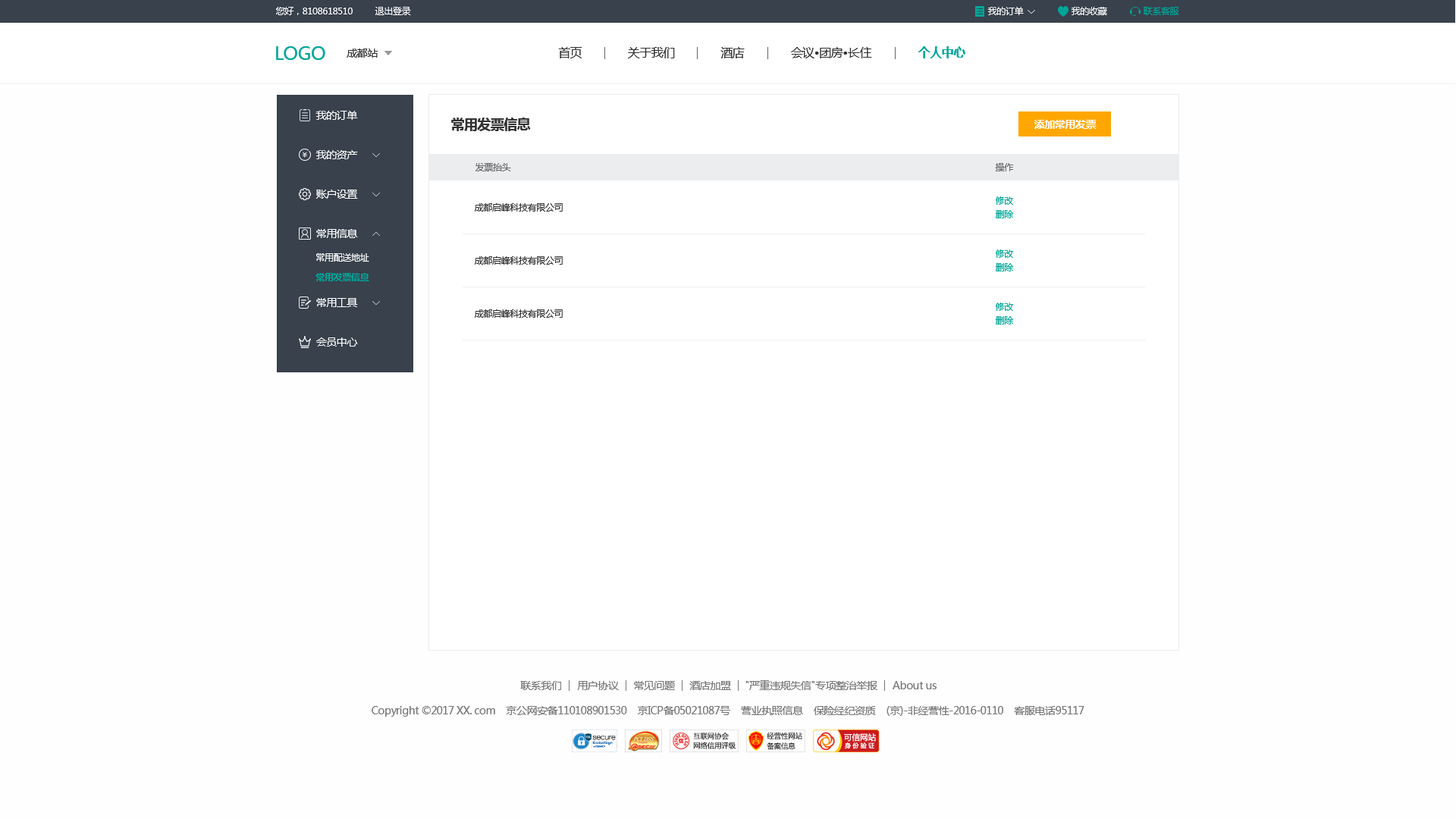
<style>
.page{position:relative;width:1456px;height:819px;background:#fefefe}
.page>*{position:absolute;margin:0}
.t1{font:9.1px "MicrosoftYaHei";letter-spacing:-0.03em;color:#ffffff}
.t2{font:9.1px "MicrosoftYaHei";letter-spacing:-0.03em;color:#00a699}
.t3{font:18.2px "MicrosoftYaHei";letter-spacing:-0.03em;color:#00a699}
.t4{font:10.6px "MicrosoftYaHei";letter-spacing:-0.03em;color:#333333}
.t5{font:12.1px "MicrosoftYaHei";letter-spacing:-0.03em;color:#333333}
.t6{font:12.1px "MicrosoftYaHei-Bold";letter-spacing:-0.03em;color:#00a699}
.t7{font:10.6px "MicrosoftYaHei";letter-spacing:-0.03em;color:#ffffff}
.t8{font:13.6px "MicrosoftYaHei-Bold";letter-spacing:-0.03em;color:#333333}
.t9{font:10.6px "MicrosoftYaHei-Bold";letter-spacing:-0.03em;color:#ffffff}
.t10{font:9.1px "MicrosoftYaHei";letter-spacing:-0.03em;color:#666666}
.t11{font:9.1px "MicrosoftYaHei";letter-spacing:-0.03em;color:#333333}
.t12{font:9.1px "MicrosoftYaHei-Bold";letter-spacing:-0.03em;color:#00a699}
.t13{font:10.6px "MicrosoftYaHei";letter-spacing:-0.03em;color:#777777}
</style>
<div class="page">
<p class="t1" style="left:276px;top:7px;width:77px;height:8px">您好，8108618510</p>
<p class="t1" style="left:375px;top:7px;width:36px;height:8px">退出登录</p>
<p class="t1" style="left:987px;top:7px;width:37px;height:8px">我的订单</p>
<p class="t1" style="left:1071px;top:7px;width:36px;height:8px">我的收藏</p>
<p class="t2" style="left:1144px;top:7px;width:35px;height:8px">联系客服</p>
<p class="t3" style="left:276px;top:46px;width:49px;height:14px">LOGO</p>
<p class="t4" style="left:347px;top:49px;width:31px;height:9px">成都站</p>
<p class="t5" style="left:558px;top:47px;width:24px;height:11px">首页</p>
<p class="t5" style="left:628px;top:47px;width:47px;height:11px">关于我们</p>
<p class="t5" style="left:720px;top:47px;width:25px;height:11px">酒店</p>
<p class="t5" style="left:791px;top:47px;width:81px;height:11px">会议•团房•长住</p>
<p class="t6" style="left:918px;top:46px;width:47px;height:12px">个人中心</p>
<p class="t7" style="left:315px;top:111px;width:43px;height:9px">我的订单</p>
<p class="t8" style="left:451px;top:118px;width:80px;height:13px">常用发票信息</p>
<p class="t9" style="left:1034px;top:120px;width:63px;height:9px">添加常用发票</p>
<p class="t7" style="left:315px;top:150px;width:43px;height:9px">我的资产</p>
<p class="t10" style="left:475px;top:163px;width:36px;height:8px">发票抬头</p>
<p class="t10" style="left:995px;top:163px;width:19px;height:8px">操作</p>
<p class="t7" style="left:316px;top:190px;width:42px;height:9px">账户设置</p>
<p class="t2" style="left:996px;top:196px;width:17px;height:9px">修改</p>
<p class="t11" style="left:475px;top:203px;width:88px;height:9px">成都启峰科技有限公司</p>
<p class="t2" style="left:995px;top:210px;width:19px;height:8px">删除</p>
<p class="t7" style="left:316px;top:229px;width:42px;height:9px">常用信息</p>
<p class="t1" style="left:316px;top:253px;width:53px;height:9px">常用配送地址</p>
<p class="t11" style="left:475px;top:256px;width:88px;height:9px">成都启峰科技有限公司</p>
<p class="t2" style="left:996px;top:249px;width:17px;height:9px">修改</p>
<p class="t2" style="left:995px;top:263px;width:19px;height:8px">删除</p>
<p class="t12" style="left:315px;top:273px;width:54px;height:8px">常用发票信息</p>
<p class="t7" style="left:316px;top:298px;width:42px;height:9px">常用工具</p>
<p class="t2" style="left:996px;top:303px;width:17px;height:8px">修改</p>
<p class="t11" style="left:475px;top:309px;width:88px;height:9px">成都启峰科技有限公司</p>
<p class="t2" style="left:995px;top:316px;width:19px;height:9px">删除</p>
<p class="t7" style="left:316px;top:337px;width:42px;height:10px">会员中心</p>
<p class="t13" style="left:520px;top:681px;width:41px;height:9px">联系我们</p>
<p class="t13" style="left:577px;top:681px;width:42px;height:9px">用户协议</p>
<p class="t13" style="left:634px;top:681px;width:41px;height:9px">常见问题</p>
<p class="t13" style="left:689px;top:681px;width:42px;height:9px">酒店加盟</p>
<p class="t13" style="left:745px;top:680px;width:132px;height:10px">"严重违规失信"专项整治举报</p>
<p class="t13" style="left:893px;top:681px;width:44px;height:8px">About us</p>
<p class="t13" style="left:372px;top:706px;width:712px;height:11px">Copyright ©2017 XX. com    京公网安备110108901530    京ICP备05021087号    营业执照信息    保险经纪资质    (京)-非经营性-2016-0110    客服电话95117</p>
</div>
